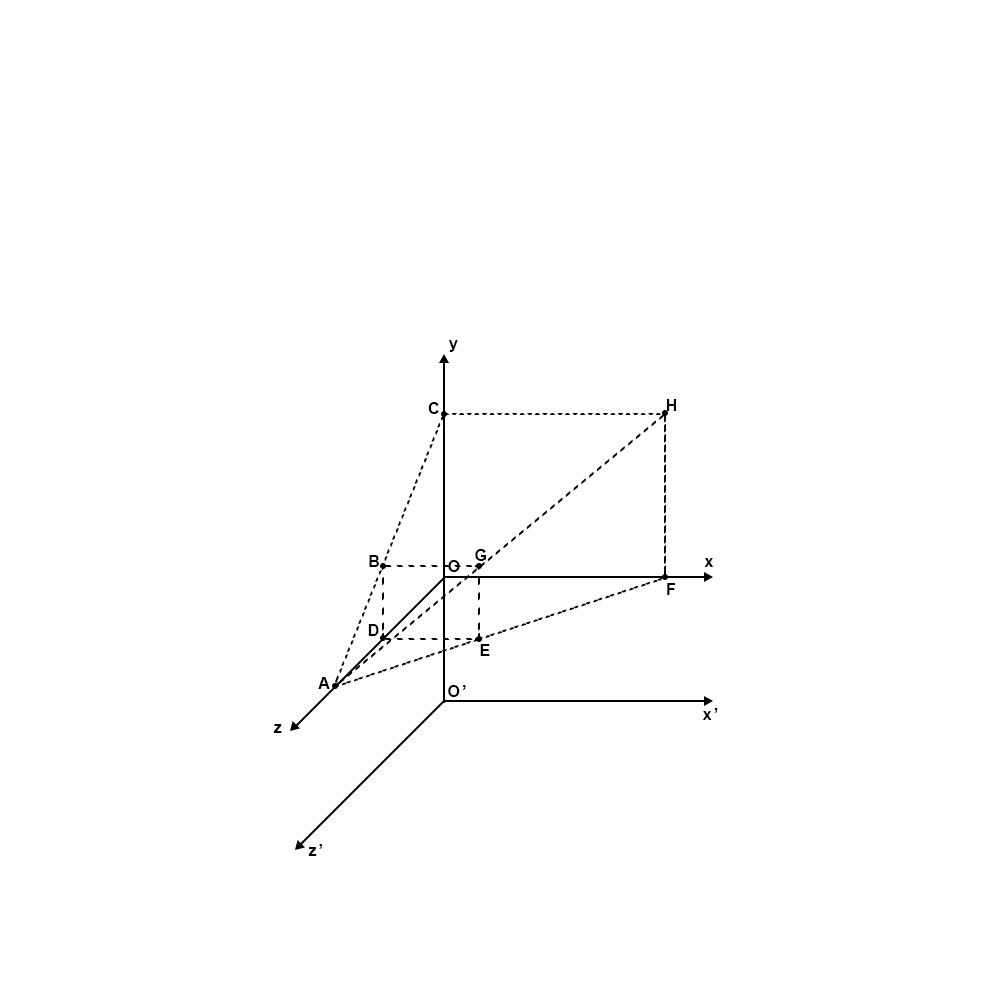
<style>
.page{position:relative;width:1000px;height:1000px;background:#ffffff}
.page>*{position:absolute;margin:0}
.t1{font:16px "Arial-BoldMT";letter-spacing:0.12em;color:#000000}
</style>
<div class="page">
<p class="t1" style="left:449px;top:340px;width:9px;height:12px">y</p>
<p class="t1" style="left:666px;top:399px;width:11px;height:12px">H</p>
<p class="t1" style="left:428px;top:402px;width:11px;height:12px">C</p>
<p class="t1" style="left:369px;top:555px;width:10px;height:12px">B</p>
<p class="t1" style="left:475px;top:549px;width:12px;height:12px">G</p>
<p class="t1" style="left:704px;top:558px;width:10px;height:9px">x</p>
<p class="t1" style="left:448px;top:560px;width:12px;height:12px">O</p>
<p class="t1" style="left:667px;top:583px;width:9px;height:12px">F</p>
<p class="t1" style="left:368px;top:624px;width:11px;height:12px">D</p>
<p class="t1" style="left:480px;top:644px;width:10px;height:12px">E</p>
<p class="t1" style="left:318px;top:677px;width:12px;height:12px">A</p>
<p class="t1" style="left:448px;top:685px;width:18px;height:12px">O’</p>
<p class="t1" style="left:703px;top:708px;width:15px;height:12px">x’</p>
<p class="t1" style="left:273px;top:724px;width:9px;height:9px">z</p>
<p class="t1" style="left:308px;top:844px;width:14px;height:12px">z’</p>
</div>
